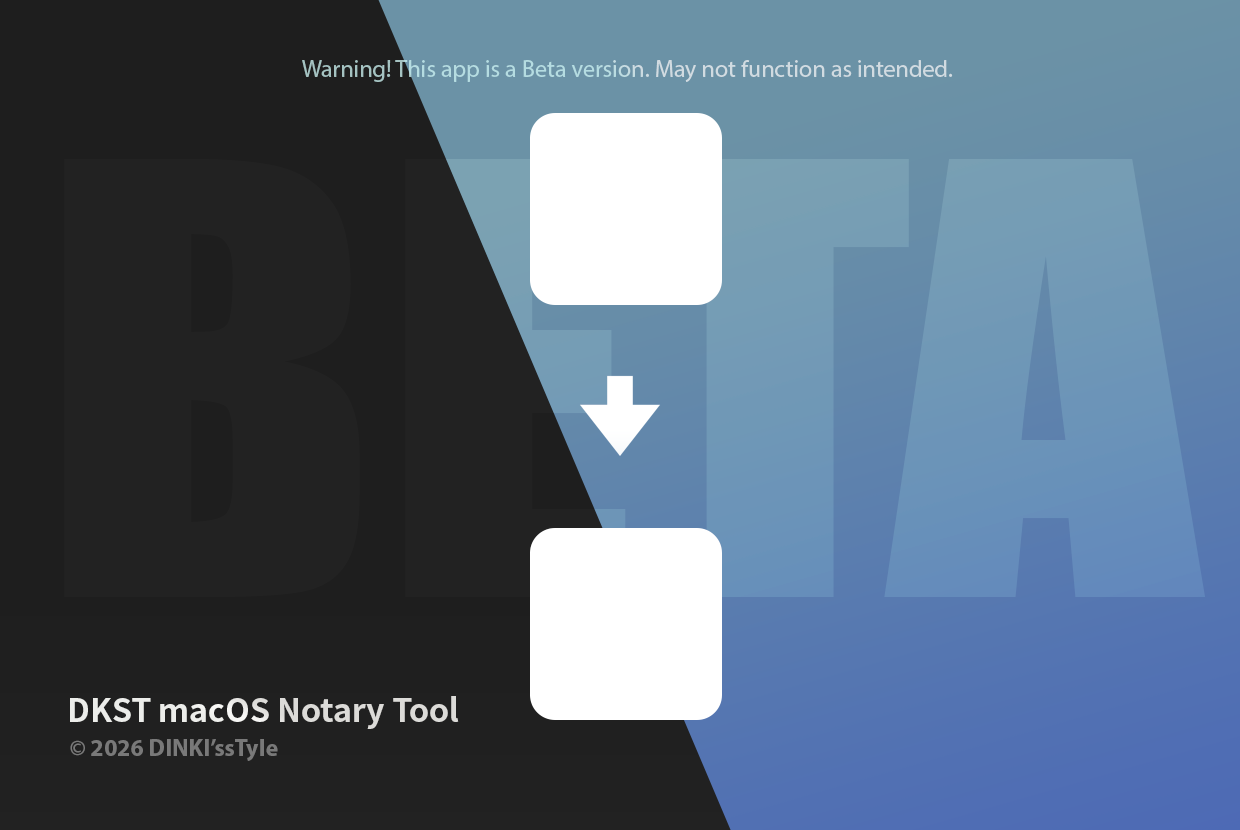
<style>
.page{position:relative;width:1240px;height:830px}
.page>*{position:absolute;margin:0}
.t1{font:24px "MyriadPro-Regular";color:#c0dbe1}
.t2{font:32.1px "NotoSansCJKkr-Bold";color:#e3e2df}
.t3{font:24px "MyriadPro-Bold";color:#797979}
</style>
<div class="page">
<p class="t1" style="left:302px;top:60px;width:651px;height:22px">Warning! This app is a Beta version. May not function as intended.</p>
<p class="t2" style="left:70px;top:696px;width:389px;height:33px">DKST macOS Notary Tool</p>
<p class="t3" style="left:70px;top:739px;width:208px;height:22px">© 2026 DINKI’ssTyle</p>
</div>
